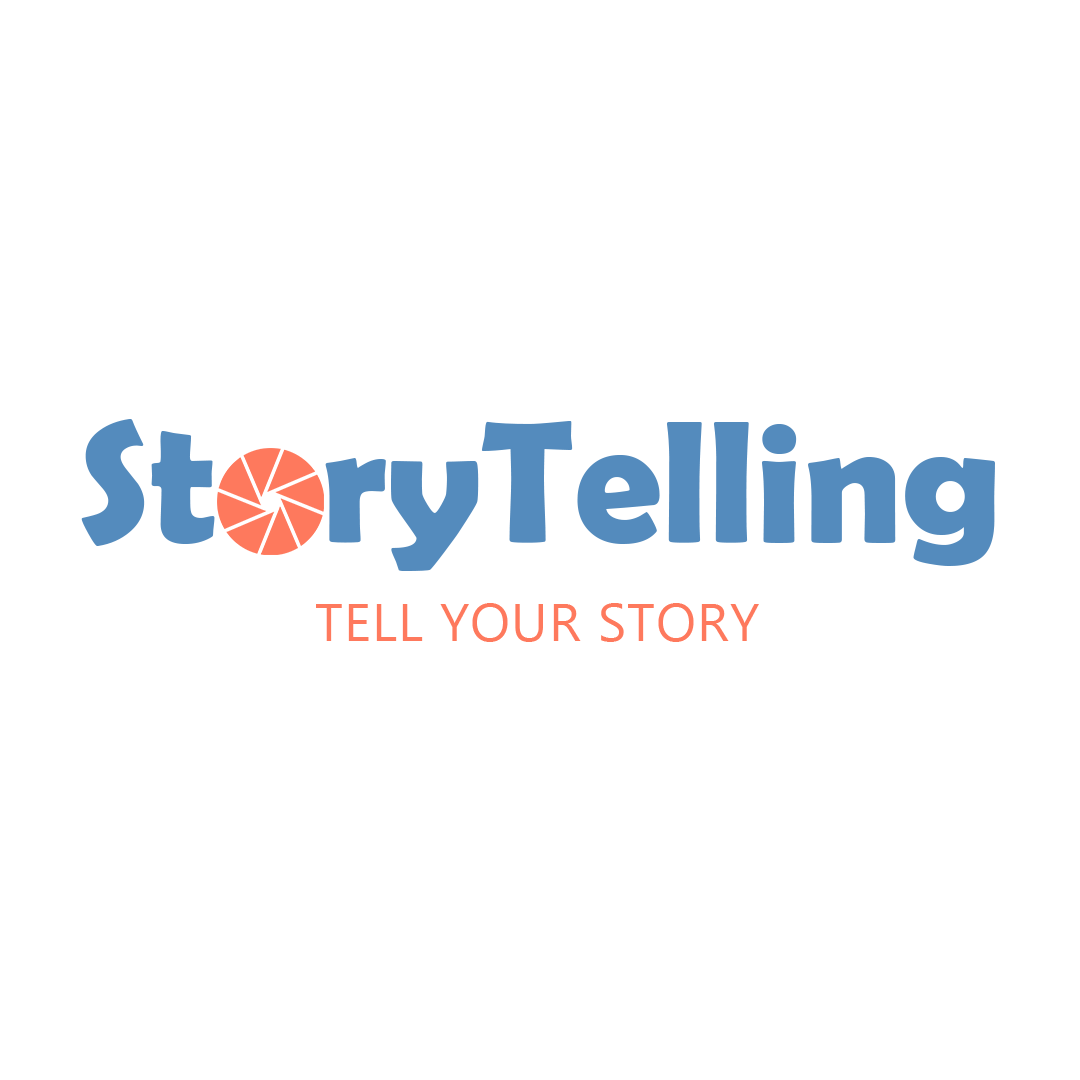
<style>
.page{position:relative;width:1080px;height:1080px;background:#ffffff}
.page>*{position:absolute;margin:0}
.t1{font:175.1px "BerlinSansFBDemi-Bold";color:#548bbd}
.t2{font:52.8px "MicrosoftTaiLe";letter-spacing:0.025em;color:#fe795d}
</style>
<div class="page">
<p class="t1" style="left:81px;top:419px;width:914px;height:152px">St   ryTelling</p>
<p class="t2" style="left:316px;top:603px;width:443px;height:39px">TELL YOUR STORY</p>
</div>
